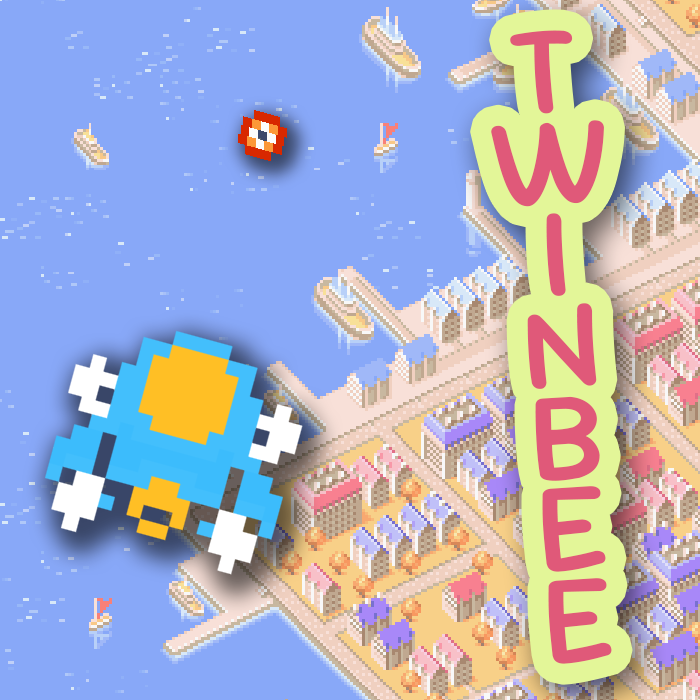
<style>
.page{position:relative;width:700px;height:700px;background:#88a8f8}
.page>*{position:absolute;margin:0}
.t1{font:127.4px/91.7px "SourGummy-Medium";color:#e05979}
</style>
<div class="page">
<p class="t1" style="left:491px;top:30px;width:121px;height:634px;text-align:center;rotate:-4deg">T<br>W<br>I<br>N<br>B<br>E<br>E</p>
</div>
